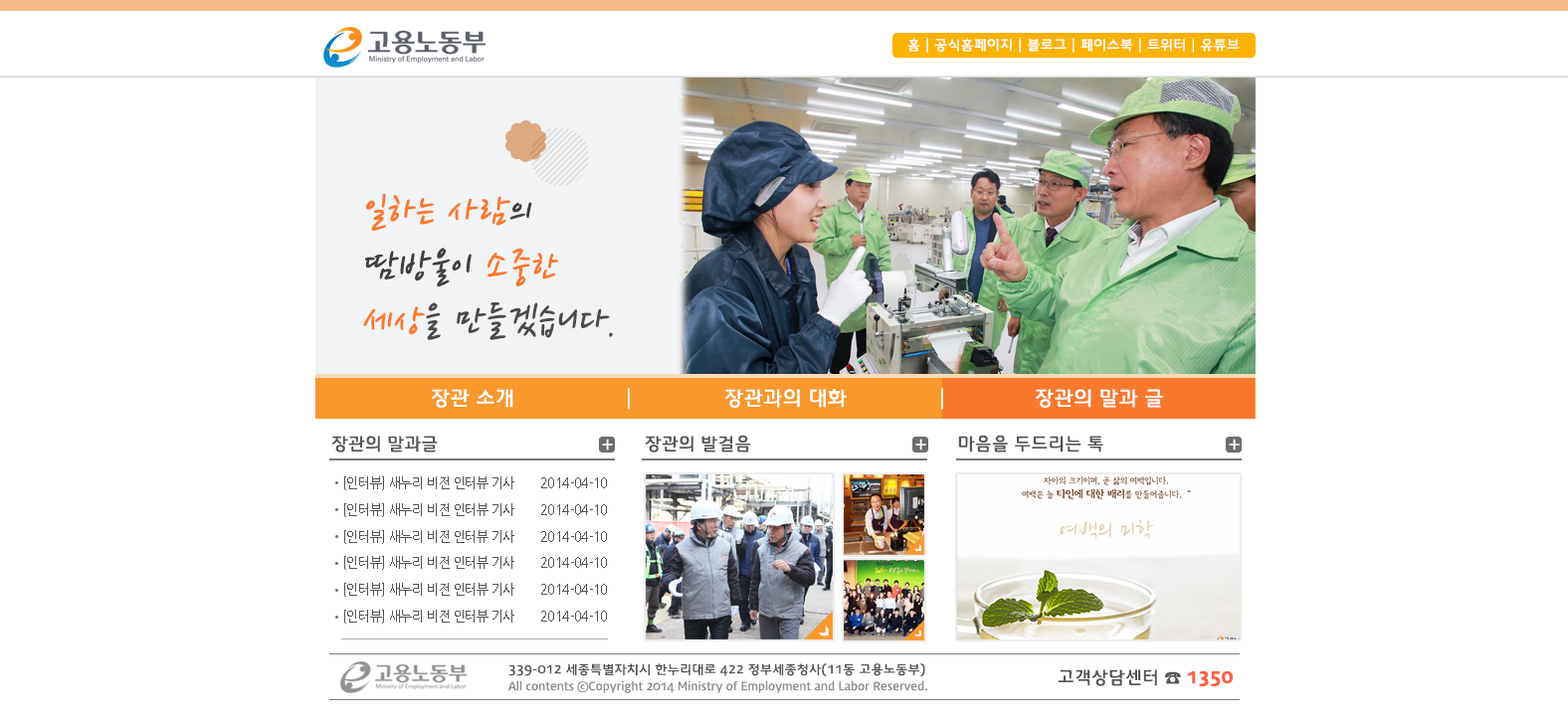
<style>
.page{position:relative;width:1568px;height:726px;background:#ffffff}
.page>*{position:absolute;margin:0}
.t1{font:12.9px "Daum_Regular";letter-spacing:0.025em;color:#ffffff}
.t2{font:42.8px/54.7px "NanumPenOTF";letter-spacing:0.025em;color:#4a4a4b;font-style:italic}
.t3{font:42.8px/54.7px "NanumPenOTF";letter-spacing:0.025em;color:#f8792d;font-style:italic}
.t4{font:42.8px/54.7px "NanumPenOTF";letter-spacing:0.025em;color:#404040;font-style:italic}
.t5{font:19.1px "Daum_Regular";letter-spacing:0.025em;color:#ffffff}
.t6{font:16.9px "Daum_Regular";letter-spacing:0.025em;color:#545455}
.t7{font:15px "Daum_Regular";letter-spacing:0.025em;color:#ffffff}
.t8{font:13.9px "NanumGothicOTF";letter-spacing:-0.025em;color:#545455;scale:0.91 1}
.t9{font:11.9px "Daum_Regular";letter-spacing:0.025em;color:#545455}
.t10{font:16.9px "Daum_SemiBold";letter-spacing:0.025em;color:#ff5e3e;font-weight:bold}
.t11{font:10.9px "Daum_Regular";color:#8d8d8e}
</style>
<div class="page">
<p class="t1" style="left:907px;top:38px;width:333px;height:15px">홈 | 공식홈페이지 | 블로그 | 페이스북 | 트위터 | 유튜브</p>
<p class="t2" style="left:363px;top:193px;width:250px;height:147px"><span class="t3">일하는 사람</span><span class="t4">의<br>땀방울이 </span><span class="t3">소중한<br>세상</span>을 만들겠습니다.</p>
<p class="t5" style="left:431px;top:389px;width:82px;height:19px">장관 소개</p>
<p class="t5" style="left:628px;top:388px;width:2px;height:22px">|</p>
<p class="t5" style="left:724px;top:389px;width:123px;height:19px">장관과의 대화</p>
<p class="t5" style="left:941px;top:388px;width:2px;height:22px">|</p>
<p class="t5" style="left:1035px;top:389px;width:128px;height:19px">장관의 말과 글</p>
<p class="t6" style="left:331px;top:436px;width:107px;height:17px">장관의 말과글</p>
<p class="t6" style="left:645px;top:435px;width:106px;height:18px">장관의 발걸음</p>
<p class="t6" style="left:958px;top:435px;width:145px;height:18px">마음을 두드리는 톡</p>
<p class="t7" style="left:602px;top:439px;width:11px;height:12px">+</p>
<p class="t7" style="left:915px;top:439px;width:11px;height:12px">+</p>
<p class="t7" style="left:1229px;top:439px;width:11px;height:12px">+</p>
<p class="t8" style="left:344px;top:477px;width:263px;height:13px">[인터뷰] 새누리 비전 인터뷰 기사        2014-04-10</p>
<p class="t8" style="left:344px;top:503px;width:263px;height:14px">[인터뷰] 새누리 비전 인터뷰 기사        2014-04-10</p>
<p class="t8" style="left:344px;top:530px;width:263px;height:14px">[인터뷰] 새누리 비전 인터뷰 기사        2014-04-10</p>
<p class="t8" style="left:344px;top:556px;width:263px;height:14px">[인터뷰] 새누리 비전 인터뷰 기사        2014-04-10</p>
<p class="t8" style="left:344px;top:583px;width:263px;height:14px">[인터뷰] 새누리 비전 인터뷰 기사        2014-04-10</p>
<p class="t8" style="left:344px;top:610px;width:263px;height:14px">[인터뷰] 새누리 비전 인터뷰 기사        2014-04-10</p>
<p class="t9" style="left:509px;top:664px;width:416px;height:13px">339-012 세종특별자치시 한누리대로 422 정부세종청사(11동 고용노동부)</p>
<p class="t6" style="left:1058px;top:670px;width:175px;height:16px">고객상담센터 ☎ <span class="t10">1350</span></p>
<p class="t11" style="left:508px;top:681px;width:419px;height:12px">All contents ⓒCopyright 2014 Ministry of Employment and Labor Reserved.</p>
</div>
